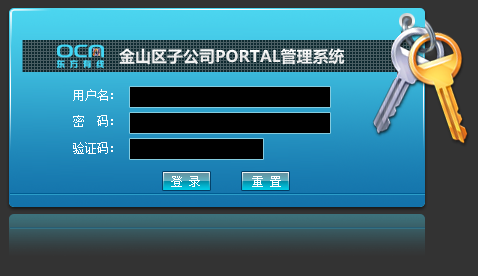
<style>
.page{position:relative;width:478px;height:276px;background:#333333}
.page>*{position:absolute;margin:0}
.t1{font:16px "MicrosoftYaHei-Bold";color:#ffffff}
.t2{font:12px "NSimSun";color:#ffffff}
</style>
<div class="page">
<p class="t1" style="left:119px;top:48px;width:226px;height:17px">金山区子公司PORTAL管理系统</p>
<p class="t2" style="left:73px;top:89px;width:40px;height:12px">用户名：</p>
<p class="t2" style="left:73px;top:115px;width:40px;height:12px">密  码：</p>
<p class="t2" style="left:73px;top:142px;width:40px;height:12px">验证码：</p>
</div>
